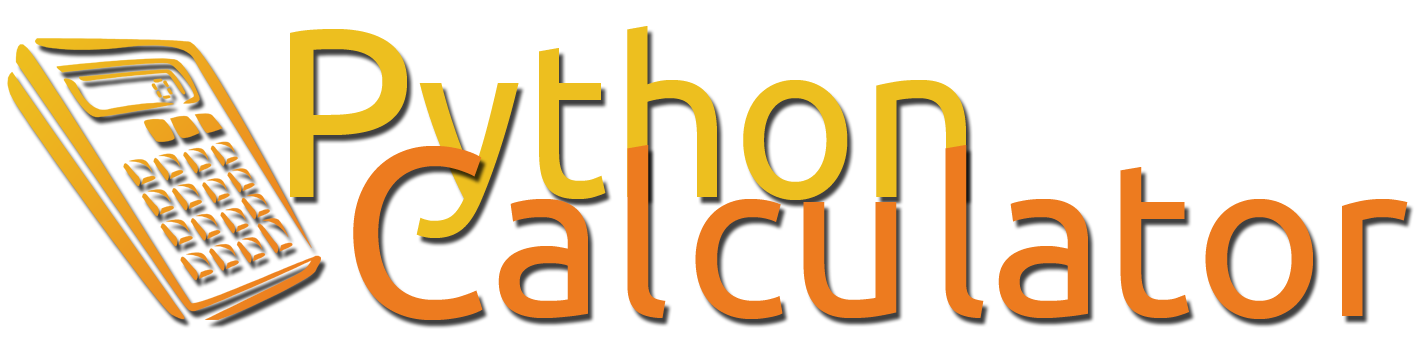
<style>
.page{position:relative;width:1416px;height:342px;background:#ffffff}
.page>*{position:absolute;margin:0}
.t1{font:220px "Ubuntu-Regular";color:#edbf1f;scale:0.97 1}
.t2{font:240px "Ubuntu-Regular";color:#edbf1f}
.t3{font:220px "Ubuntu-Regular";color:#ed7b1f}
.t4{font:240px "Ubuntu-Regular";color:#ed7b1f}
</style>
<div class="page">
<p class="t1" style="left:290px;top:26px;width:676px;height:212px"><span class="t2">P</span>ython</p>
<p class="t3" style="left:353px;top:145px;width:1055px;height:175px"><span class="t4">C</span>a l cu lator</p>
</div>
